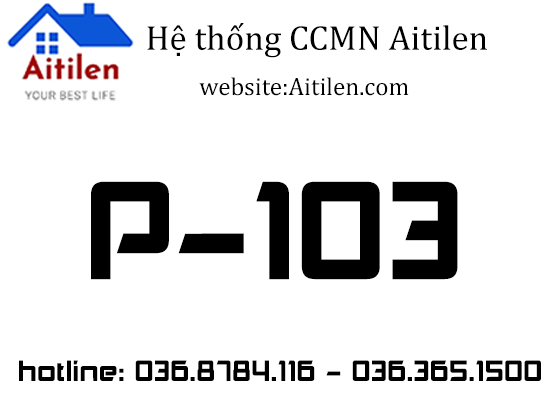
<style>
.page{position:relative;width:559px;height:397px;background:#ffffff}
.page>*{position:absolute;margin:0}
.t1{font:35.1px "Cambria";color:#000000}
.t2{font:24.9px "Cambria";color:#000000}
.t3{font:132.7px "UTM-Akashi";color:#000000}
.t4{font:28.1px "UTM-Akashi";color:#000000}
</style>
<div class="page">
<p class="t1" style="left:147px;top:23px;width:340px;height:35px">Hệ thống CCMN Aitilen</p>
<p class="t2" style="left:199px;top:77px;width:210px;height:19px">website:Aitilen.com</p>
<p class="t3" style="left:91px;top:181px;width:367px;height:99px">P-103</p>
<p class="t4" style="left:19px;top:360px;width:522px;height:21px">hotline: 036.8784.116 - 036.365.1500</p>
</div>
